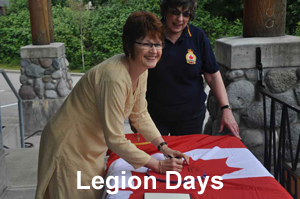
<style>
.page{position:relative;width:300px;height:199px}
.page>*{position:absolute;margin:0}
.t1{font:25px "Arial-BoldMT";color:#ffffff}
.t2{font:58.3px "Arial-BoldMT";color:#ffffff}
</style>
<div class="page">
<p class="t1" style="left:77px;top:171px;width:147px;height:24px">Legion Days <span class="t2">DaysL</span></p>
</div>
